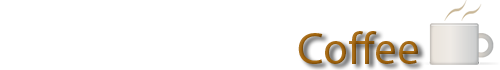
<style>
.page{position:relative;width:500px;height:70px;background:#ffffff}
.page>*{position:absolute;margin:0}
.t1{font:45.8px "MyriadPro-Regular";color:#a3650d}
</style>
<div class="page">
<p class="t1" style="left:298px;top:31px;width:120px;height:33px">Coffee</p>
</div>
